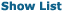
<style>
.page{position:relative;width:65px;height:13px;background:#ffffff}
.page>*{position:absolute;margin:0}
.t1{font:11.1px "Verdana-Bold";color:#0f628b}
</style>
<div class="page">
<p class="t1" style="left:1px;top:1px;width:61px;height:10px">Show List</p>
</div>
